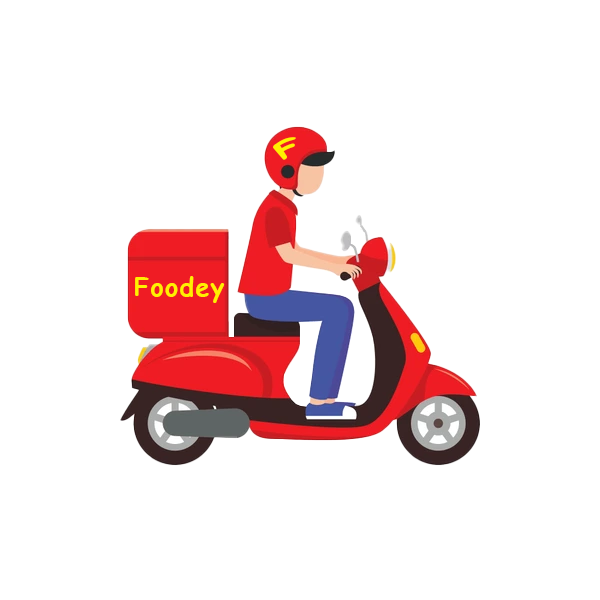
<style>
.page{position:relative;width:600px;height:600px;background:#ffffff}
.page>*{position:absolute;margin:0}
.t1{font:23px "ComicSansMS-Bold";letter-spacing:0.05em;color:#fff001}
.t2{font:25px "ComicSansMS-Bold";letter-spacing:0.05em;color:#fff001}
</style>
<div class="page">
<p class="t1" style="left:273px;top:137px;width:23px;height:23px;rotate:-24deg">F</p>
<p class="t2" style="left:135px;top:276px;width:90px;height:27px">Foodey</p>
</div>
